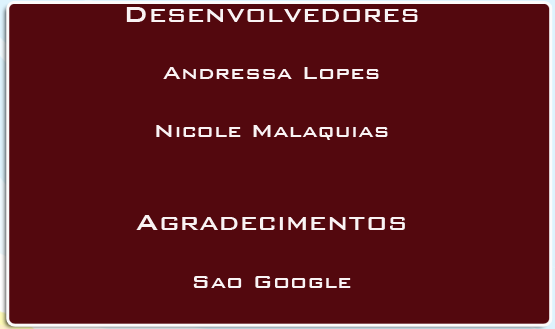
<style>
.page{position:relative;width:555px;height:329px;background:#53080e}
.page>*{position:absolute;margin:0}
.t1{font:24px "BankGothicBT-Medium";color:#f9f3f4}
.t2{font:30px "BankGothicBT-Medium";color:#f9f3f4}
</style>
<div class="page">
<p class="t1" style="left:126px;top:7px;width:292px;height:281px;text-align:center"><span class="t2">Desenvolvedores <br></span><br>Andressa Lopes <br><br>Nicole Malaquias <br><br><br><span class="t2">Agradecimentos <br></span><br>Sao Google</p>
</div>
